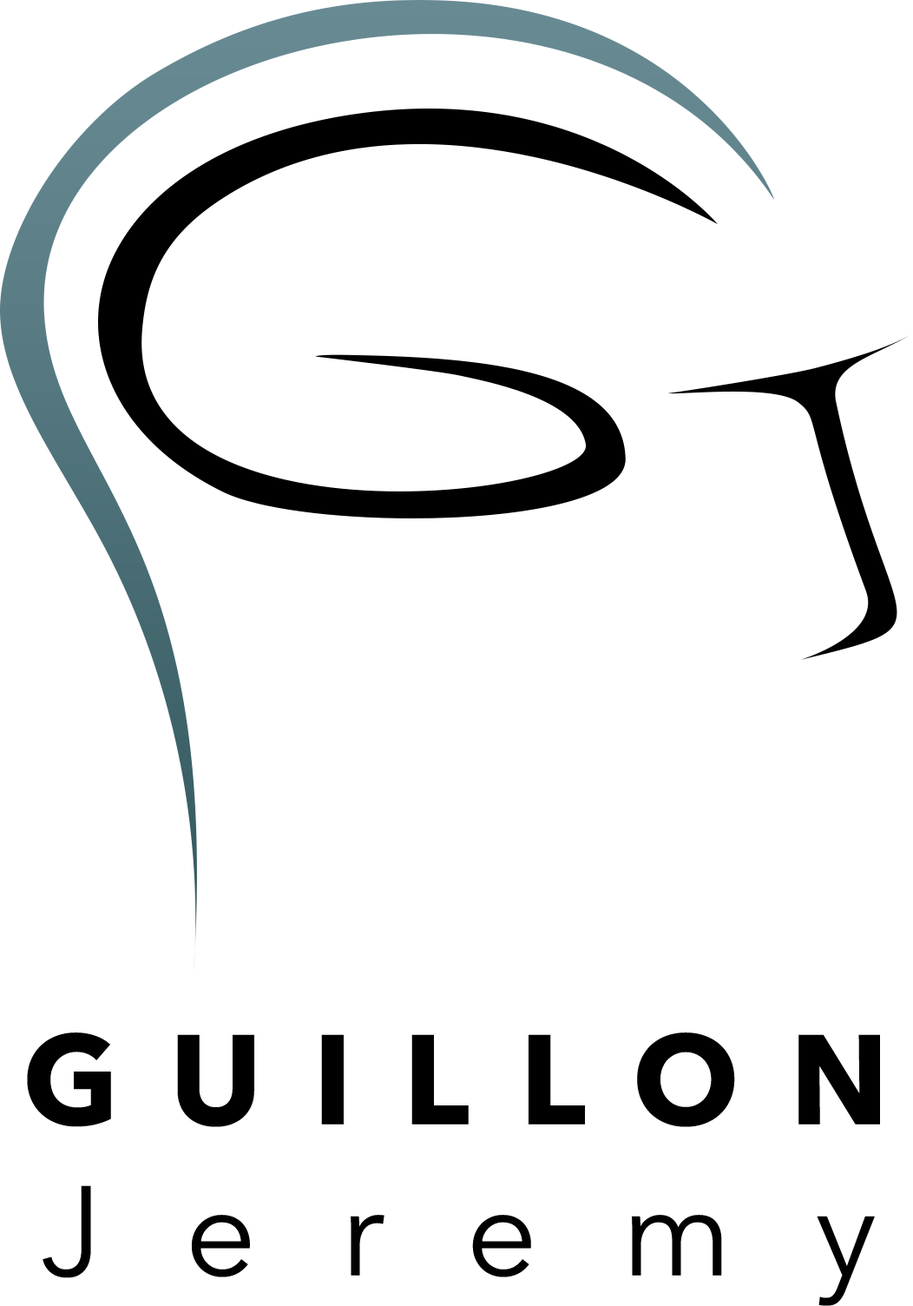
<style>
.page{position:relative;width:913px;height:1306px;background:#ffffff}
.page>*{position:absolute;margin:0}
.t1{font:125.9px "AvenirNext-Bold";letter-spacing:0.4em;color:#000000}
.t2{font:125.9px "AvenirNext-Regular";letter-spacing:0.66em;color:#000000}
</style>
<div class="page">
<p class="t1" style="left:27px;top:1032px;width:853px;height:274px;text-align:center">GUILLON<br><span class="t2">Jeremy</span></p>
</div>
